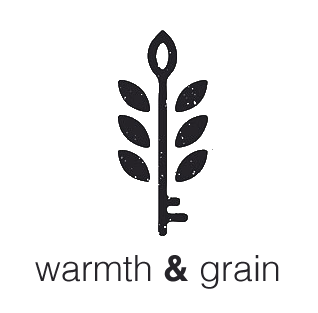
<style>
.page{position:relative;width:318px;height:313px;background:#ffffff}
.page>*{position:absolute;margin:0}
.t1{font:36px "Helvetica-Light";color:#262429}
.t2{font:36px "Helvetica-Bold";color:#262429}
</style>
<div class="page">
<p class="t1" style="left:35px;top:255px;width:244px;height:34px">warmth <span class="t2">&amp;</span> grain</p>
</div>
